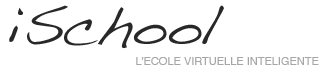
<style>
.page{position:relative;width:327px;height:76px;background:#ffffff}
.page>*{position:absolute;margin:0}
.t1{font:55px "Handwriting-Dakota";color:#282828}
.t2{font:11px "Helvetica";color:#a6a6a6}
</style>
<div class="page">
<p class="t1" style="left:9px;top:5px;width:215px;height:44px">iSchool</p>
<p class="t2" style="left:136px;top:57px;width:183px;height:8px">L’ECOLE VIRTUELLE INTELIGENTE</p>
</div>
